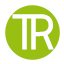
<style>
.page{position:relative;width:64px;height:64px;background:#ffffff}
.page>*{position:absolute;margin:0}
.t1{font:52px "Gidole-Regular";letter-spacing:-0.22em;color:#ffffff;font-weight:bold}
</style>
<div class="page">
<p class="t1" style="left:12px;top:14px;width:42px;height:36px">TR</p>
</div>
